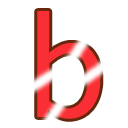
<style>
.page{position:relative;width:128px;height:128px;background:#ffffff}
.page>*{position:absolute;margin:0}
.t1{font:132.9px "SourceHanSansCN-Regular";color:#f92f35}
</style>
<div class="page">
<p class="t1" style="left:37px;top:11px;width:64px;height:108px">b</p>
</div>
